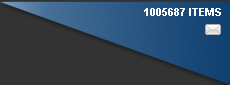
<style>
.page{position:relative;width:230px;height:85px;background:#333333}
.page>*{position:absolute;margin:0}
.t1{font:11px "Arial-BoldMT";color:#ffffff;text-transform:uppercase}
</style>
<div class="page">
<p class="t1" style="left:144px;top:8px;width:77px;height:8px">1005687 items</p>
</div>
